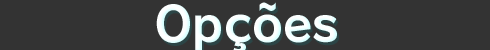
<style>
.page{position:relative;width:490px;height:50px;background:#333333}
.page>*{position:absolute;margin:0}
.t1{font:48px "RodinPro-B";color:#feffff}
</style>
<div class="page">
<p class="t1" style="left:156px;top:2px;width:181px;height:50px">Opções</p>
</div>
